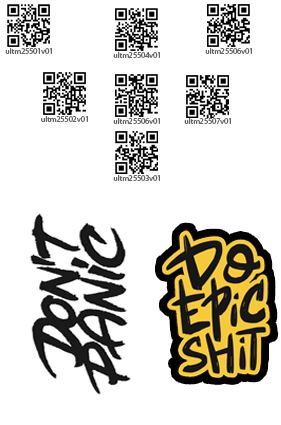
<style>
.page{position:relative;width:281px;height:425px;background:#ffffff}
.page>*{position:absolute;margin:0}
.t1{font:8px "MyriadPro-Regular";color:#666666}
</style>
<div class="page">
<p class="t1" style="left:5px;top:48px;width:47px;height:6px">ultm25501v01</p>
<p class="t1" style="left:113px;top:52px;width:47px;height:6px">ultm25504v01</p>
<p class="t1" style="left:205px;top:48px;width:47px;height:6px">ultm25506v01</p>
<p class="t1" style="left:41px;top:116px;width:47px;height:6px">ultm25502v01</p>
<p class="t1" style="left:113px;top:118px;width:47px;height:6px">ultm25506v01</p>
<p class="t1" style="left:184px;top:118px;width:47px;height:6px">ultm25507v01</p>
<p class="t1" style="left:113px;top:175px;width:47px;height:6px">ultm25503v01</p>
</div>
